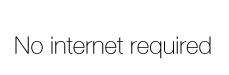
<style>
.page{position:relative;width:229px;height:75px;background:#ffffff}
.page>*{position:absolute;margin:0}
.t1{font:24px "HelveticaNeueLTStd-Th";color:#000000}
</style>
<div class="page">
<p class="t1" style="left:15px;top:36px;width:196px;height:23px">No internet required</p>
</div>
